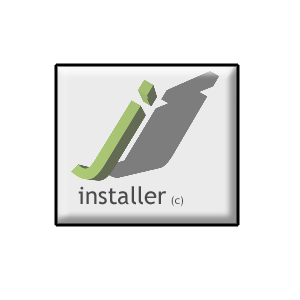
<style>
.page{position:relative;width:300px;height:300px;background:#ffffff}
.page>*{position:absolute;margin:0}
.t1{font:24px "TrebuchetMS";color:#4a4a4a}
.t2{font:11px "TrebuchetMS";color:#4a4a4a}
</style>
<div class="page">
<p class="t1" style="left:78px;top:186px;width:105px;height:21px">installer <span class="t2">(c)</span></p>
</div>
